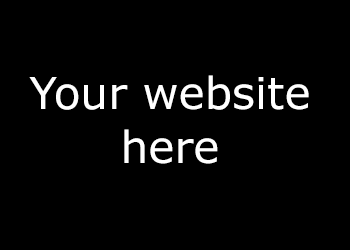
<style>
.page{position:relative;width:350px;height:250px;background:#000000}
.page>*{position:absolute;margin:0}
.t1{font:44px "Verdana";color:#ffffff}
</style>
<div class="page">
<p class="t1" style="left:29px;top:75px;width:280px;height:89px;text-align:center">Your website<br>here</p>
</div>
